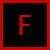
<style>
.page{position:relative;width:50px;height:50px;background:#040404}
.page>*{position:absolute;margin:0}
.t1{font:27.6px "LucidaGrande";color:#c70505}
</style>
<div class="page">
<p class="t1" style="left:19px;top:15px;width:12px;height:20px">F</p>
</div>
